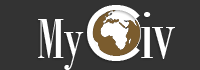
<style>
.page{position:relative;width:200px;height:70px;background:#333333}
.page>*{position:absolute;margin:0}
.t1{font:75px "CenturyGothic";color:#ffffff}
.t2{font:72px "BodoniMTCondensed";color:#ffffff}
.t3{font:60px "BodoniMTCondensed";color:#ffffff}
</style>
<div class="page">
<p class="t1" style="left:87px;top:5px;width:53px;height:56px">C</p>
<p class="t2" style="left:141px;top:12px;width:34px;height:47px">iv</p>
<p class="t3" style="left:38px;top:19px;width:46px;height:51px">My</p>
</div>
